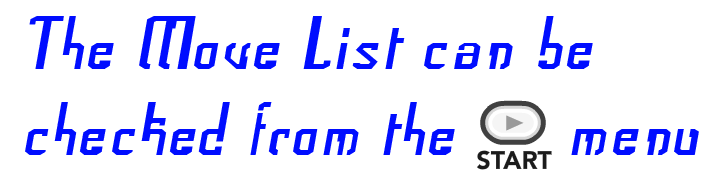
<style>
.page{position:relative;width:717px;height:188px;background:#ffffff}
.page>*{position:absolute;margin:0}
.t1{font:72px "Frak-Regular";color:#000dff}
</style>
<div class="page">
<p class="t1" style="left:25px;top:16px;width:674px;height:139px">The Move List can be<br>checked from the      menu</p>
</div>
